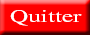
<style>
.page{position:relative;width:90px;height:35px;background:#ff0000}
.page>*{position:absolute;margin:0}
.t1{font:18.1px "STIXGeneral-Regular";color:#ffffff;scale:1.39 1}
</style>
<div class="page">
<p class="t1" style="left:10px;top:10px;width:72px;height:16px">Quitter</p>
</div>
